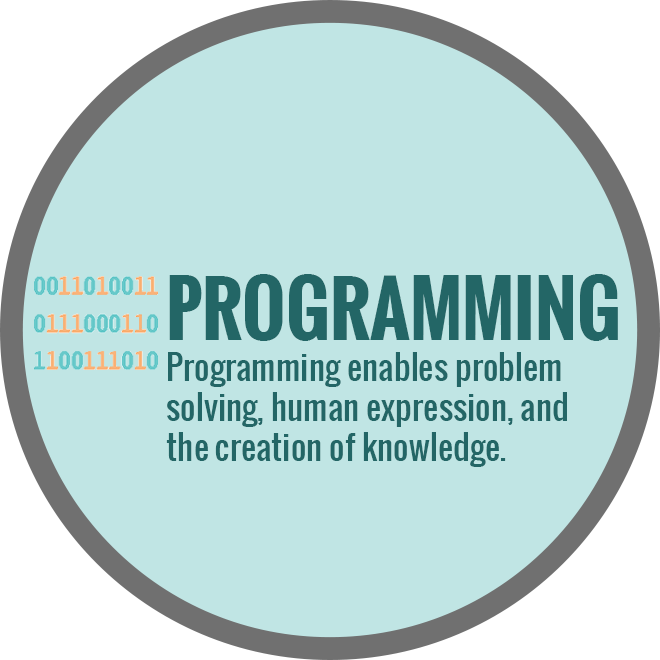
<style>
.page{position:relative;width:660px;height:660px;background:#c0e5e4}
.page>*{position:absolute;margin:0}
.t1{font:72.9px "Oswald-Bold";color:#236666}
.t2{font:33.3px "Oswald-Regular";color:#236666}
</style>
<div class="page">
<p class="t1" style="left:169px;top:274px;width:449px;height:67px">PROGRAMMING</p>
<p class="t2" style="left:166px;top:352px;width:401px;height:115px">Programming enables problem <br>solving, human expression, and <br>the creation of knowledge.</p>
</div>
